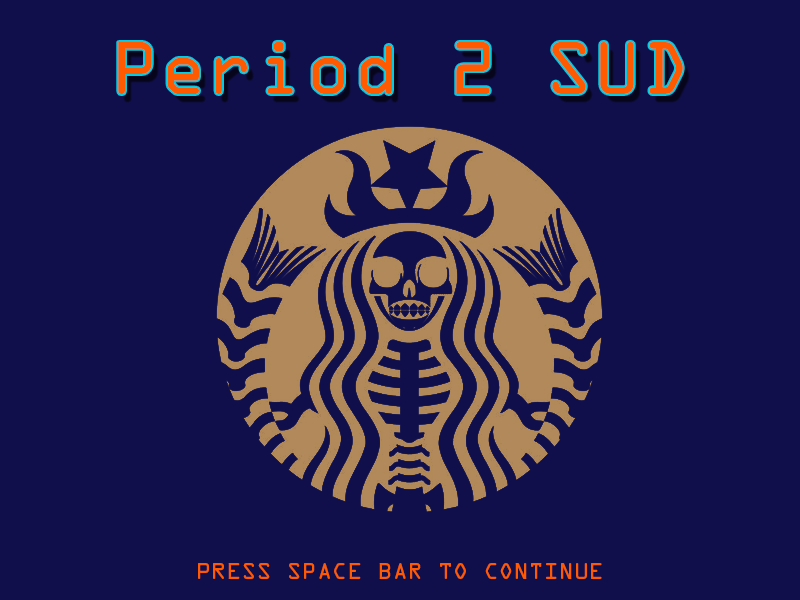
<style>
.page{position:relative;width:800px;height:600px;background:#100f4c}
.page>*{position:absolute;margin:0}
.t1{font:67px "OCRAStd";color:#ff5a00}
.t2{font:21px "OCRAStd";color:#ff5a00}
</style>
<div class="page">
<p class="t1" style="left:118px;top:42px;width:565px;height:52px">Period 2 SUD</p>
<p class="t2" style="left:198px;top:563px;width:404px;height:16px">PRESS SPACE BAR TO CONTINUE</p>
</div>
